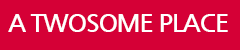
<style>
.page{position:relative;width:240px;height:50px;background:#d50036}
.page>*{position:absolute;margin:0}
.t1{font:25px "NanumGothicBold";letter-spacing:-0.05em;color:#ffffff}
</style>
<div class="page">
<p class="t1" style="left:8px;top:14px;width:220px;height:18px">A TWOSOME PLACE</p>
</div>
